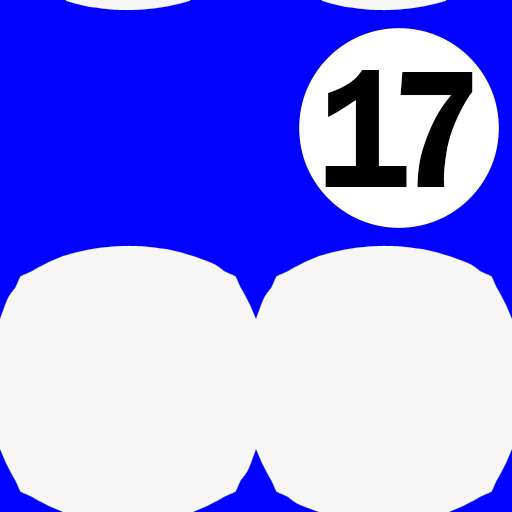
<style>
.page{position:relative;width:512px;height:512px;background:#f7f7f7}
.page>*{position:absolute;margin:0}
.t1{font:172.5px "FranklinGothic-Demi";letter-spacing:-0.05em;color:#010101;scale:0.87 1}
</style>
<div class="page">
<p class="t1" style="left:325px;top:70px;width:148px;height:117px">17</p>
</div>
